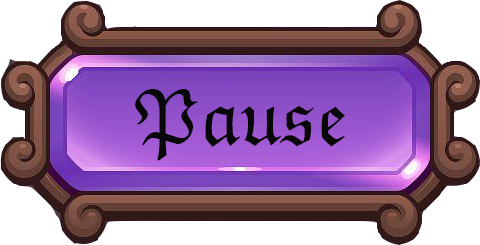
<style>
.page{position:relative;width:480px;height:245px;background:#ffffff}
.page>*{position:absolute;margin:0}
.t1{font:80px "EuclidFraktur";color:#080808}
</style>
<div class="page">
<p class="t1" style="left:135px;top:89px;width:210px;height:72px">Pause</p>
</div>
